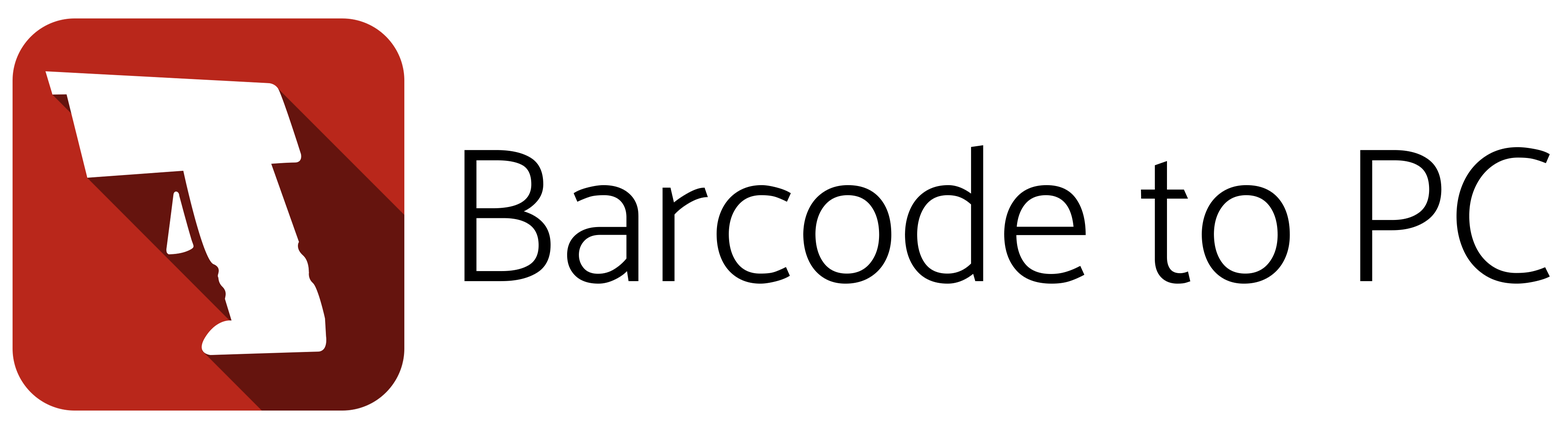
<style>
.page{position:relative;width:1568px;height:429px;background:#ffffff}
.page>*{position:absolute;margin:0}
.t1{font:192.6px "Catamaran-Light";color:#000000}
</style>
<div class="page">
<p class="t1" style="left:464px;top:145px;width:1086px;height:138px">Barcode to PC</p>
</div>
